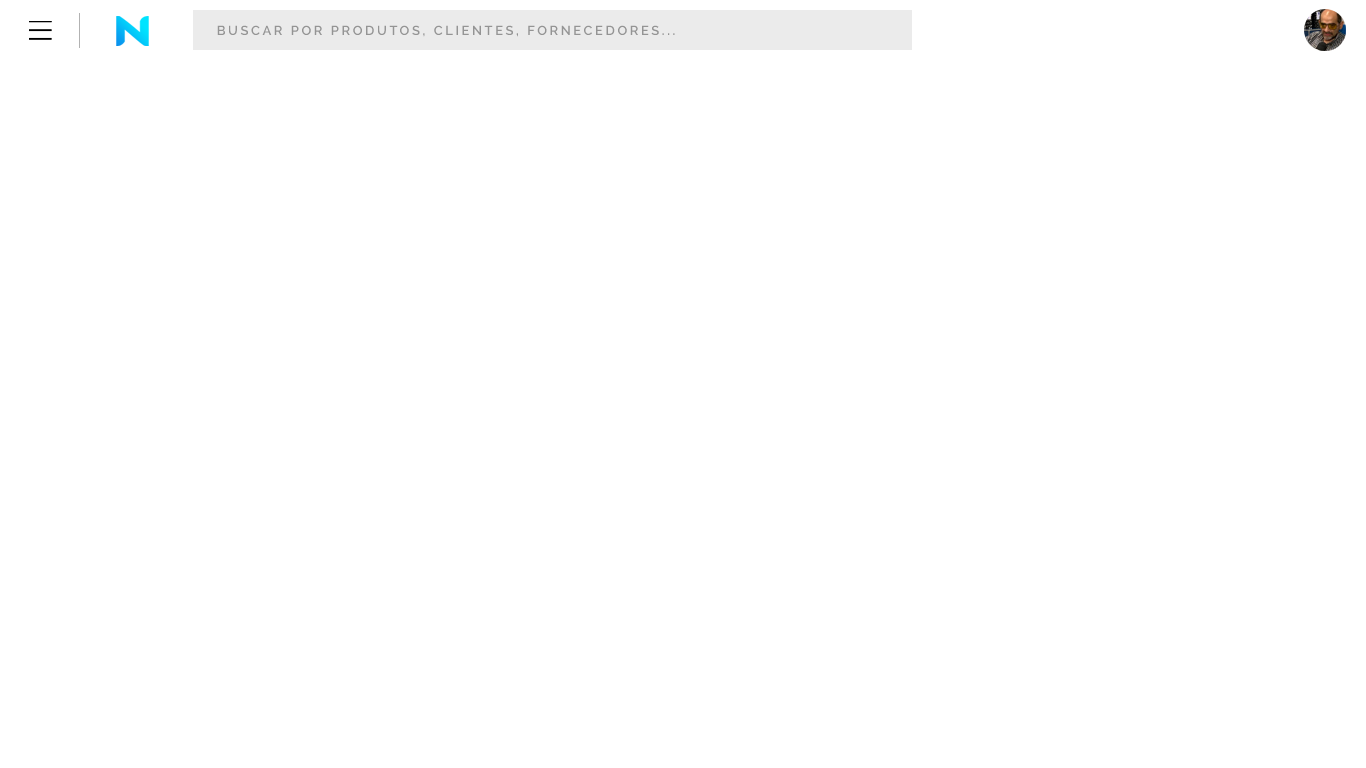
<style>
.page{position:relative;width:1366px;height:768px;background:#ffffff}
.page>*{position:absolute;margin:0}
.t1{font:13px "Raleway-SemiBold";letter-spacing:0.2em;color:#949494;text-transform:uppercase}
</style>
<div class="page">
<p class="t1" style="left:217px;top:25px;width:458px;height:12px">buscar por produtos, clientes, fornecedores...</p>
</div>
